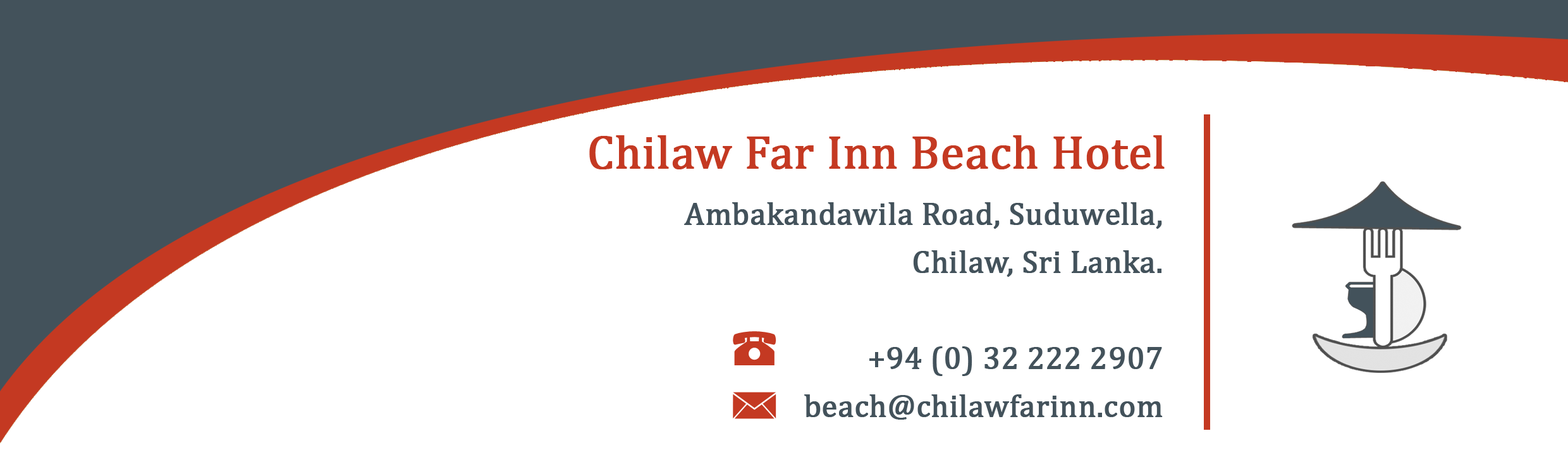
<style>
.page{position:relative;width:1568px;height:462px;background:#ffffff}
.page>*{position:absolute;margin:0}
.t1{font:47.4px "Cambria";color:#c43922;font-weight:bold}
.t2{font:31.6px/48.1px "Cambria";color:#43525b;font-weight:bold}
</style>
<div class="page">
<p class="t1" style="left:589px;top:135px;width:576px;height:34px">Chilaw Far Inn Beach Hotel</p>
<p class="t2" style="left:684px;top:202px;width:479px;height:218px;text-align:right">Ambakandawila Road, Suduwella,<br>Chilaw, Sri Lanka.<br><br>+94 (0) 32 222 2907<br>beach@chilawfarinn.com</p>
</div>
